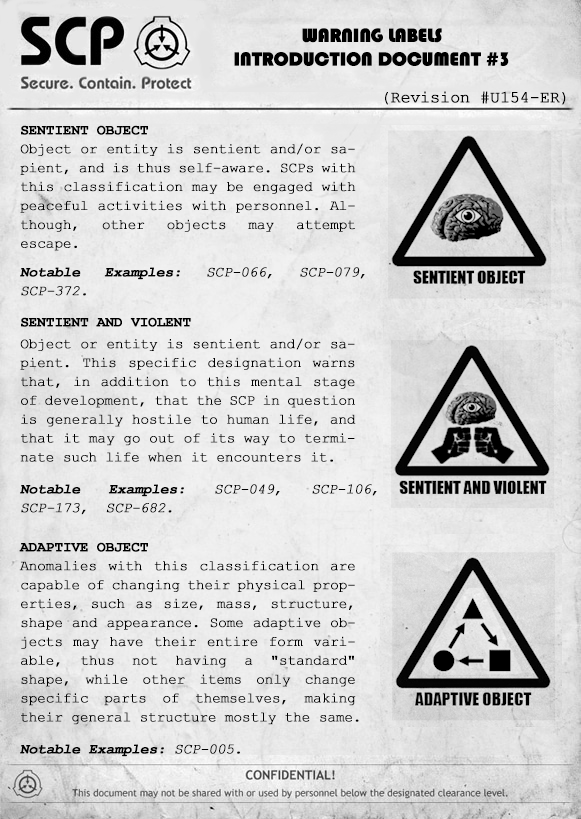
<style>
.page{position:relative;width:581px;height:819px}
.page>*{position:absolute;margin:0}
.t1{font:19.7px/23.6px "Bauhaus93";letter-spacing:-0.025em;color:#000000;text-transform:uppercase;font-weight:bold}
.t2{font:16.5px "CourierNewPSMT";letter-spacing:-0.025em;color:#000000;font-weight:bold}
.t3{font:14.2px/18.9px "CourierNewPSMT";letter-spacing:-0.025em;color:#000000;font-weight:bold}
.t4{font:14.2px/18.9px "CourierNewPS-BoldMT";letter-spacing:-0.025em;color:#000000;text-transform:uppercase;font-weight:bold}
.t5{font:14.2px/18.9px "CourierNewPSMT";letter-spacing:-0.025em;color:#000000;font-weight:bold;font-style:italic}
.t6{font:14.2px/18.9px "CourierNewPS-BoldMT";letter-spacing:-0.025em;color:#000000;font-weight:bold;font-style:italic}
.t7{font:14.2px "CourierNewPS-BoldMT";letter-spacing:-0.025em;color:#000000;text-transform:uppercase;font-weight:bold}
.t8{font:14.2px/18.9px "CourierNewPS-BoldMT";letter-spacing:-0.025em;color:#000000;font-style:italic}
.t9{font:14.2px "CourierNewPS-BoldMT";letter-spacing:-0.025em;color:#000000;font-weight:bold;font-style:italic}
.t10{font:14.2px "CourierNewPSMT";letter-spacing:-0.025em;color:#000000;font-weight:bold;font-style:italic}
</style>
<div class="page">
<p class="t1" style="left:234px;top:28px;width:275px;height:38px;text-align:center">Warning Labels <br>Introduction Document #3</p>
<p class="t2" style="left:385px;top:91px;width:181px;height:14px">(Revision #U154-ER)</p>
<p class="t3" style="left:20px;top:125px;width:336px;height:126px;text-align:justify"><span class="t4">Sentient Object<br></span>Object or entity is sentient and/or sapient, and is thus self-aware. SCPs with this classification may be engaged with peaceful activities with personnel. Although, other objects may attempt escape.</p>
<p class="t5" style="left:20px;top:267px;width:345px;height:29px;text-align:justify"><span class="t6">Notable Examples:</span> SCP-066, SCP-079, SCP-372.</p>
<p class="t7" style="left:21px;top:317px;width:170px;height:10px">Sentient and Violent</p>
<p class="t3" style="left:20px;top:338px;width:336px;height:124px;text-align:justify">Object or entity is sentient and/or sapient. This specific designation warns that, in addition to this mental stage of development, that the SCP in question is generally hostile to human life, and that it may go out of its way to terminate such life when it encounters it.</p>
<p class="t5" style="left:20px;top:484px;width:357px;height:31px;text-align:justify"><span class="t6">Notable Examples:</span> SCP-049, SCP-106, SCP-173,  SCP-682.</p>
<p class="t3" style="left:19px;top:542px;width:340px;height:183px;text-align:justify"><span class="t4">Adaptive Object<br></span>Anomalies with this classification are capable of changing their physical properties, such as size, mass, structure, shape and appearance. Some adaptive objects may have their entire form variable, thus not having a "standard" shape, while other items only change specific parts of themselves, making their general structure mostly the same.<br><br><br><span class="t6">Notable Examples: </span><span class="t8">SCP-294, SCP-914</span><span class="t6">.</span></p>
<p class="t9" style="left:20px;top:744px;width:220px;height:13px">Notable Examples:<span class="t10"> SCP-005.</span></p>
</div>
